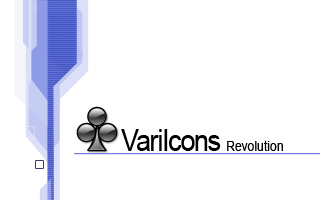
<style>
.page{position:relative;width:320px;height:200px;background:#ffffff}
.page>*{position:absolute;margin:0}
.t1{font:14px "ArialMT";color:#000000;scale:0.89 1}
.t2{font:30px "ArialMT";letter-spacing:-0.04em;color:#000000;scale:0.89 1}
</style>
<div class="page">
<p class="t1" style="left:121px;top:129px;width:162px;height:22px"><span class="t2">VariIcons </span>Revolution</p>
</div>
